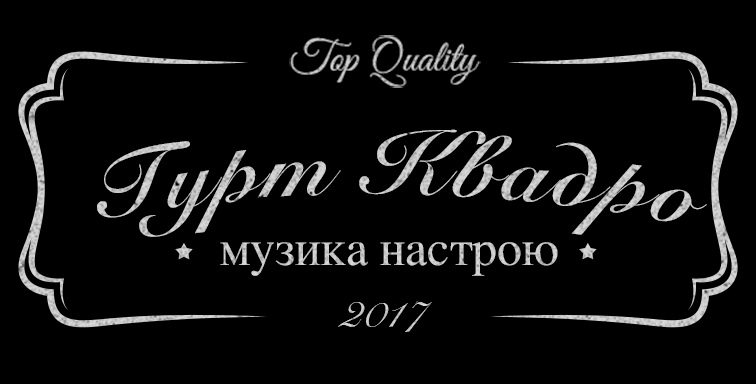
<style>
.page{position:relative;width:756px;height:384px;background:#000000}
.page>*{position:absolute;margin:0}
.t1{font:43.6px "GreatVibes-Regular";color:#c5c5c5}
.t2{font:89.6px "SnellRoundhand-Bold";letter-spacing:0.046em;color:#c7c7c7}
.t3{font:49.9px "Times-Roman";color:#c8c8c8}
.t4{font:46.1px "SnellRoundhand";color:#c9c9c9}
</style>
<div class="page">
<p class="t1" style="left:289px;top:35px;width:192px;height:53px">Top Quality</p>
<p class="t2" style="left:97px;top:129px;width:610px;height:108px">Гурт Квадро</p>
<p class="t3" style="left:220px;top:242px;width:338px;height:34px">музика настрою</p>
<p class="t4" style="left:338px;top:301px;width:94px;height:31px">2017</p>
</div>
